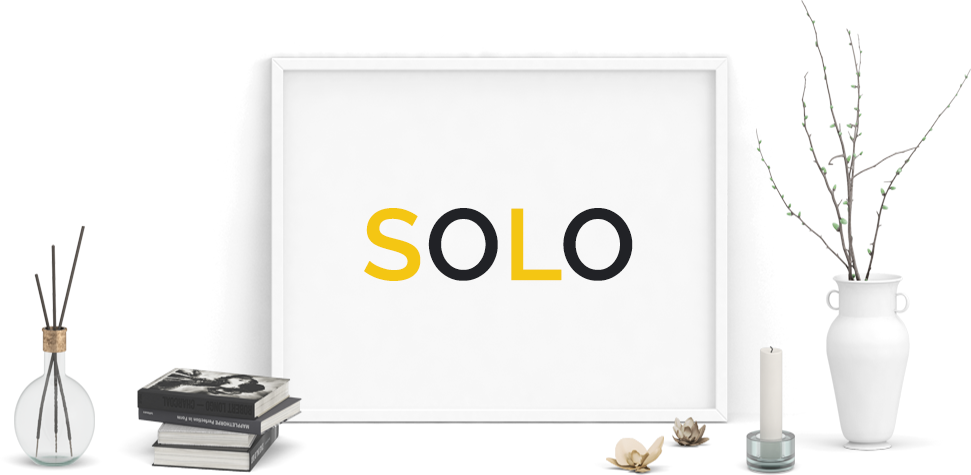
<style>
.page{position:relative;width:971px;height:475px;background:#ffffff}
.page>*{position:absolute;margin:0}
.t1{font:100px "Raleway-SemiBold";color:#f4c613;font-weight:bold}
.t2{font:100px "Raleway-SemiBold";color:#212226;font-weight:bold}
</style>
<div class="page">
<p class="t1" style="left:364px;top:208px;width:269px;height:73px">S<span class="t2">O</span>L<span class="t2">O</span></p>
</div>
